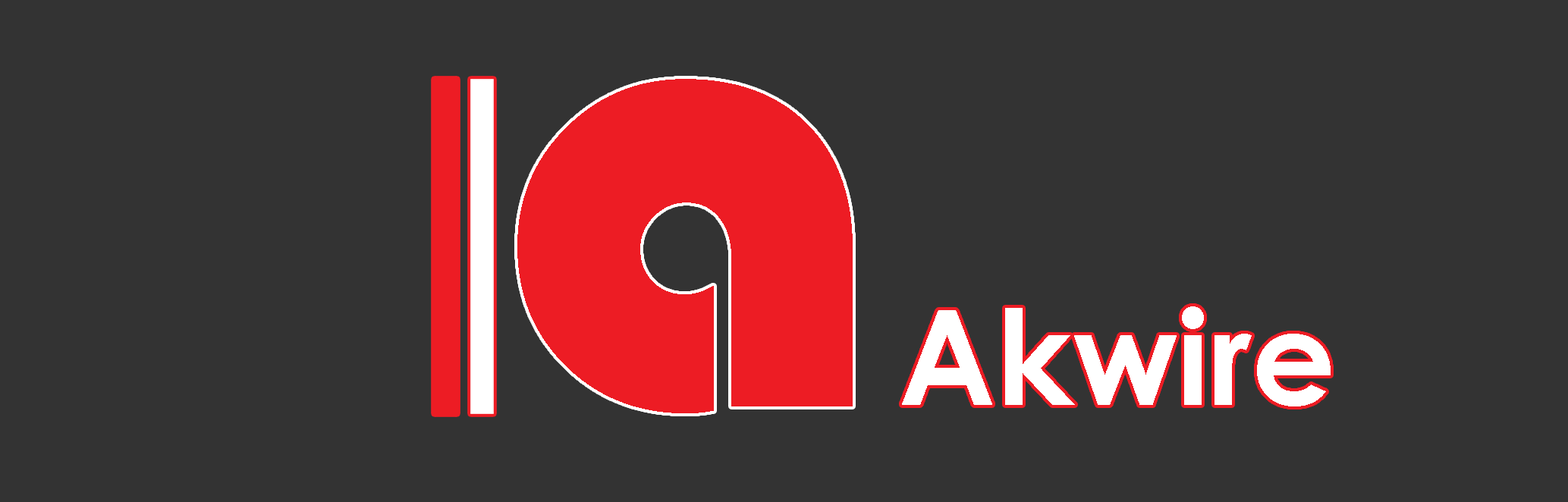
<style>
.page{position:relative;width:1568px;height:502px;background:#333333}
.page>*{position:absolute;margin:0}
.t1{font:658.5px "Bauhaus93";color:#ed1c24}
.t2{font:131.7px "CenturyGothic-Bold";color:#ffffff}
</style>
<div class="page">
<p class="t1" style="left:517px;top:79px;width:336px;height:334px">a</p>
<p class="t2" style="left:902px;top:306px;width:429px;height:101px">Akwire</p>
</div>
